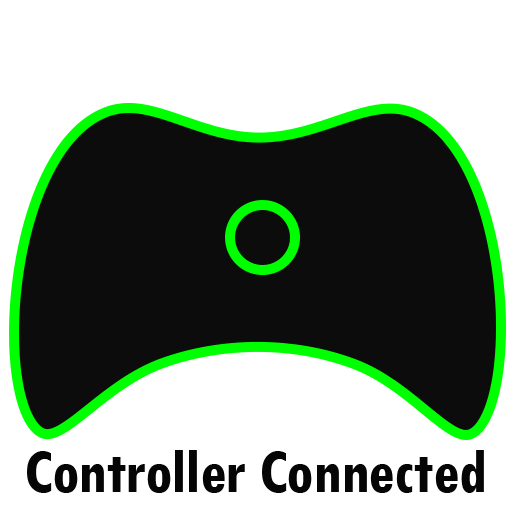
<style>
.page{position:relative;width:512px;height:512px;background:#ffffff}
.page>*{position:absolute;margin:0}
.t1{font:65px "TwCenMT-CondensedBold";letter-spacing:-0.01em;color:#050505}
</style>
<div class="page">
<p class="t1" style="left:27px;top:450px;width:457px;height:43px">Controller Connected</p>
</div>
